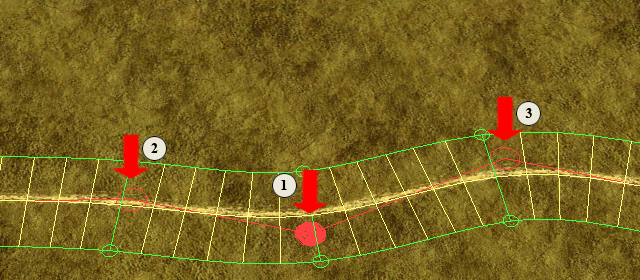
<style>
.page{position:relative;width:640px;height:280px}
.page>*{position:absolute;margin:0}
.t1{font:14px "TimesNewRomanPS-BoldMT";color:#000000}
</style>
<div class="page">
<p class="t1" style="left:525px;top:108px;width:7px;height:10px">3</p>
<p class="t1" style="left:151px;top:143px;width:7px;height:10px">2</p>
<p class="t1" style="left:281px;top:180px;width:6px;height:10px">1</p>
</div>
